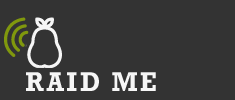
<style>
.page{position:relative;width:235px;height:100px;background:#333333}
.page>*{position:absolute;margin:0}
.t1{font:27.5px "RockwellStd-Bold";letter-spacing:0.105em;color:#f6f6f6;text-transform:uppercase;scale:0.91 1}
</style>
<div class="page">
<p class="t1" style="left:26px;top:72px;width:130px;height:19px">raid me</p>
</div>
